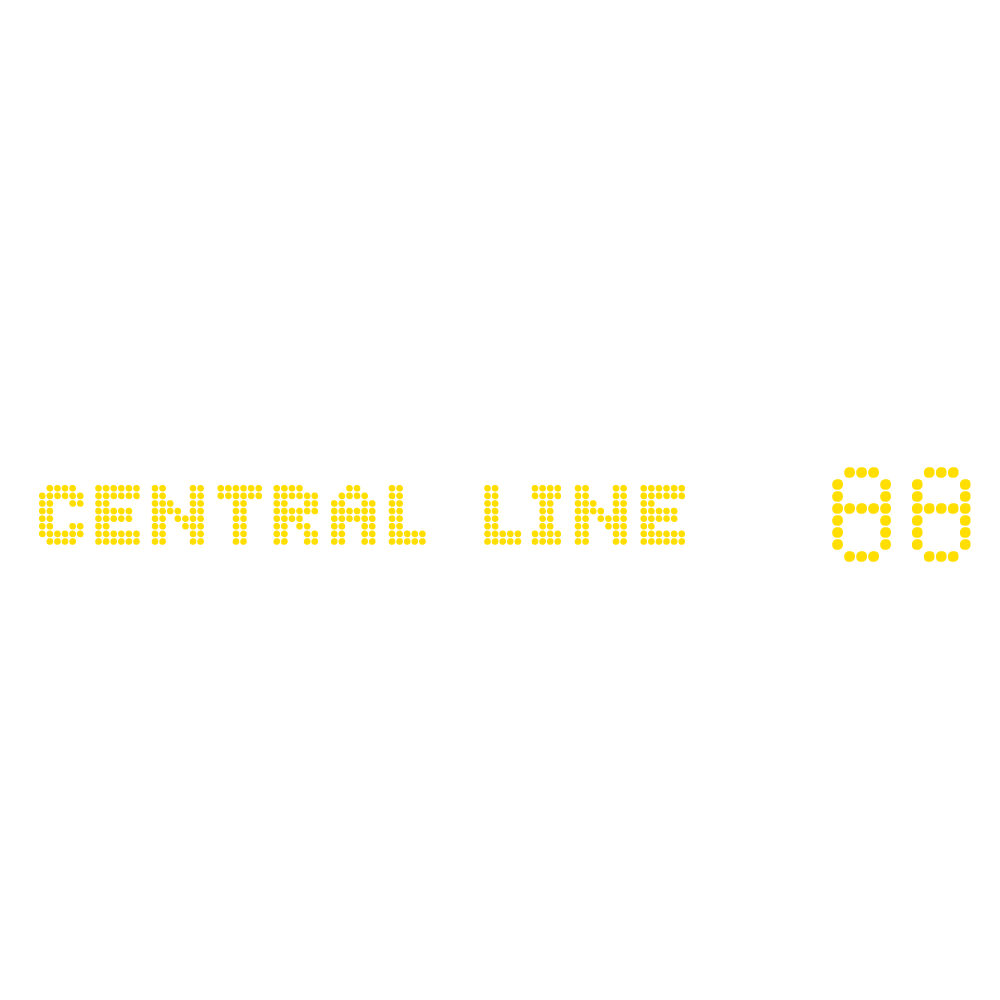
<style>
.page{position:relative;width:1000px;height:1000px;background:#ffffff}
.page>*{position:absolute;margin:0}
.t1{font:120px "Bazaronite";color:#ffde00}
.t2{font:76px "Bazaronite";color:#ffde00}
</style>
<div class="page">
<p class="t1" style="left:832px;top:467px;width:139px;height:95px">88</p>
<p class="t2" style="left:39px;top:485px;width:646px;height:60px">CENTRAL LINE</p>
</div>
